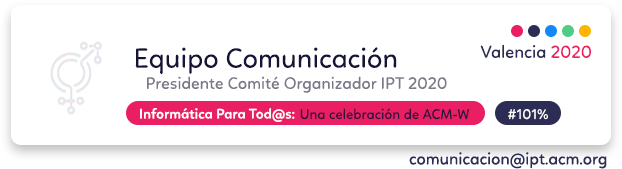
<style>
.page{position:relative;width:622px;height:169px;background:#ffffff}
.page>*{position:absolute;margin:0}
.t1{font:28.1px "Linotte-Regular";color:#14143b}
.t2{font:17.7px "Linotte-Regular";color:#2c2c54}
.t3{font:17.7px "Linotte-Regular";color:#e91e63}
.t4{font:16.9px "Linotte-Regular";color:#797988}
.t5{font:14.3px "Linotte-SemiBold";color:#ffffff}
.t6{font:14.3px "Linotte-Regular";color:#14143b}
.t7{font:14.3px "Linotte-Regular";color:#ffffff}
.t8{font:16.9px "Linotte-Regular";color:#2c2c54}
</style>
<div class="page">
<p class="t1" style="left:135px;top:47px;width:262px;height:28px">Equipo Comunicación</p>
<p class="t2" style="left:480px;top:44px;width:66px;height:14px">Valencia</p>
<p class="t3" style="left:551px;top:45px;width:40px;height:13px">2020</p>
<p class="t4" style="left:147px;top:76px;width:300px;height:17px">Presidente Comité Organizador IPT 2020</p>
<p class="t5" style="left:140px;top:108px;width:155px;height:14px">Informática Para Tod@s:</p>
<p class="t6" style="left:300px;top:108px;width:169px;height:12px;opacity:0.95">Una celebración de ACM-W</p>
<p class="t7" style="left:508px;top:109px;width:40px;height:11px">#101%</p>
<p class="t8" style="left:409px;top:152px;width:198px;height:17px">comunicacion@ipt.acm.org</p>
</div>
